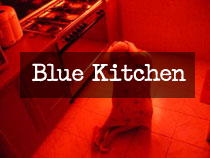
<style>
.page{position:relative;width:210px;height:158px}
.page>*{position:absolute;margin:0}
.t1{font:22px "Passport";color:#fffefe}
</style>
<div class="page">
<p class="t1" style="left:32px;top:63px;width:154px;height:19px">Blue Kitchen</p>
</div>
